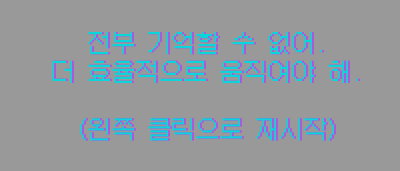
<style>
.page{position:relative;width:400px;height:171px;background:#999999}
.page>*{position:absolute;margin:0}
.t1{font:24px "GalmuriMono11-Regular";color:#09d6da}
.t2{font:24px "GalmuriMono11-Regular"}
</style>
<div class="page">
<p class="t1" style="left:52px;top:32px;width:307px;height:109px;text-align:center">전부 기억할 수 없어.<br>더 효율적으로 움직여야 해.<br><br>(왼쪽 클릭으로 재시작)</p>
<p class="t2" style="left:53px;top:32px;width:307px;height:109px;text-align:center">전부 기억할 수 없어.<br>더 효율적으로 움직여야 해.<br><br>(왼쪽 클릭으로 재시작)</p>
</div>
